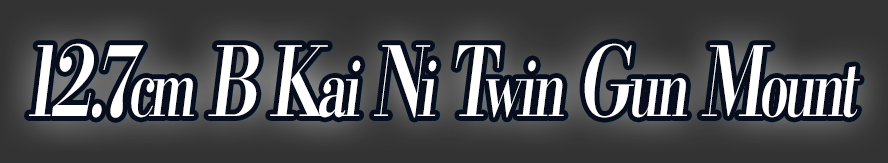
<style>
.page{position:relative;width:888px;height:163px}
.page>*{position:absolute;margin:0}
.t1{font:96px "KochoStd-Heavy";letter-spacing:-0.08em;color:#ffffff;font-style:italic;scale:0.69 1}
.t2{font:76.8px "KochoStd-Heavy";letter-spacing:-0.08em;color:#ffffff;font-style:italic;scale:0.69 1}
</style>
<div class="page">
<p class="t1" style="left:29px;top:43px;width:831px;height:75px">12.7<span class="t2">cm</span> B K<span class="t2">ai</span> N<span class="t2">i</span> T<span class="t2">win</span> G<span class="t2">un</span> M<span class="t2">ount</span></p>
</div>
